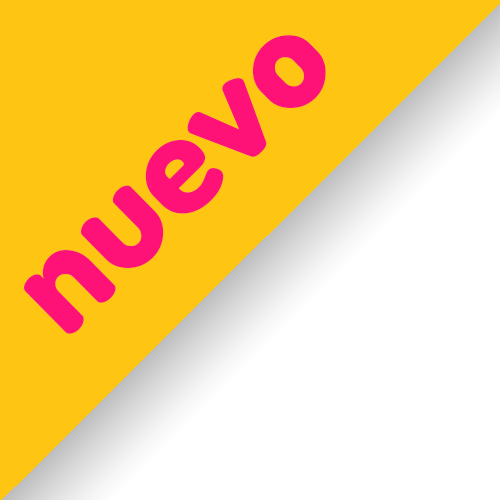
<style>
.page{position:relative;width:500px;height:500px;background:#ffc513}
.page>*{position:absolute;margin:0}
.t1{font:150px "Dosis-ExtraBold";color:#ff1278}
</style>
<div class="page">
<p class="t1" style="left:24px;top:35px;width:302px;height:299px;rotate:-45deg">nuevo</p>
</div>
